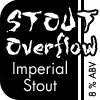
<style>
.page{position:relative;width:100px;height:100px;background:#000000}
.page>*{position:absolute;margin:0}
.t1{font:30px/24px "WILD3InfectedHurtNormal";color:#ffffff}
.t2{font:32px/24px "WILD3InfectedHurtNormal";color:#ffffff}
.t3{font:16px/17px "FuturaLT-Book";color:#ffffff}
.t4{font:9px "FuturaLT-Book";color:#000000}
</style>
<div class="page">
<p class="t1" style="left:6px;top:7px;width:91px;height:52px"><span class="t2">STOUT<br></span>Overflow</p>
<p class="t3" style="left:13px;top:60px;width:54px;height:32px;text-align:center">Imperial<br>Stout</p>
<p class="t4" style="left:88px;top:61px;width:9px;height:36px;rotate:-90deg">8 % ABV</p>
</div>
